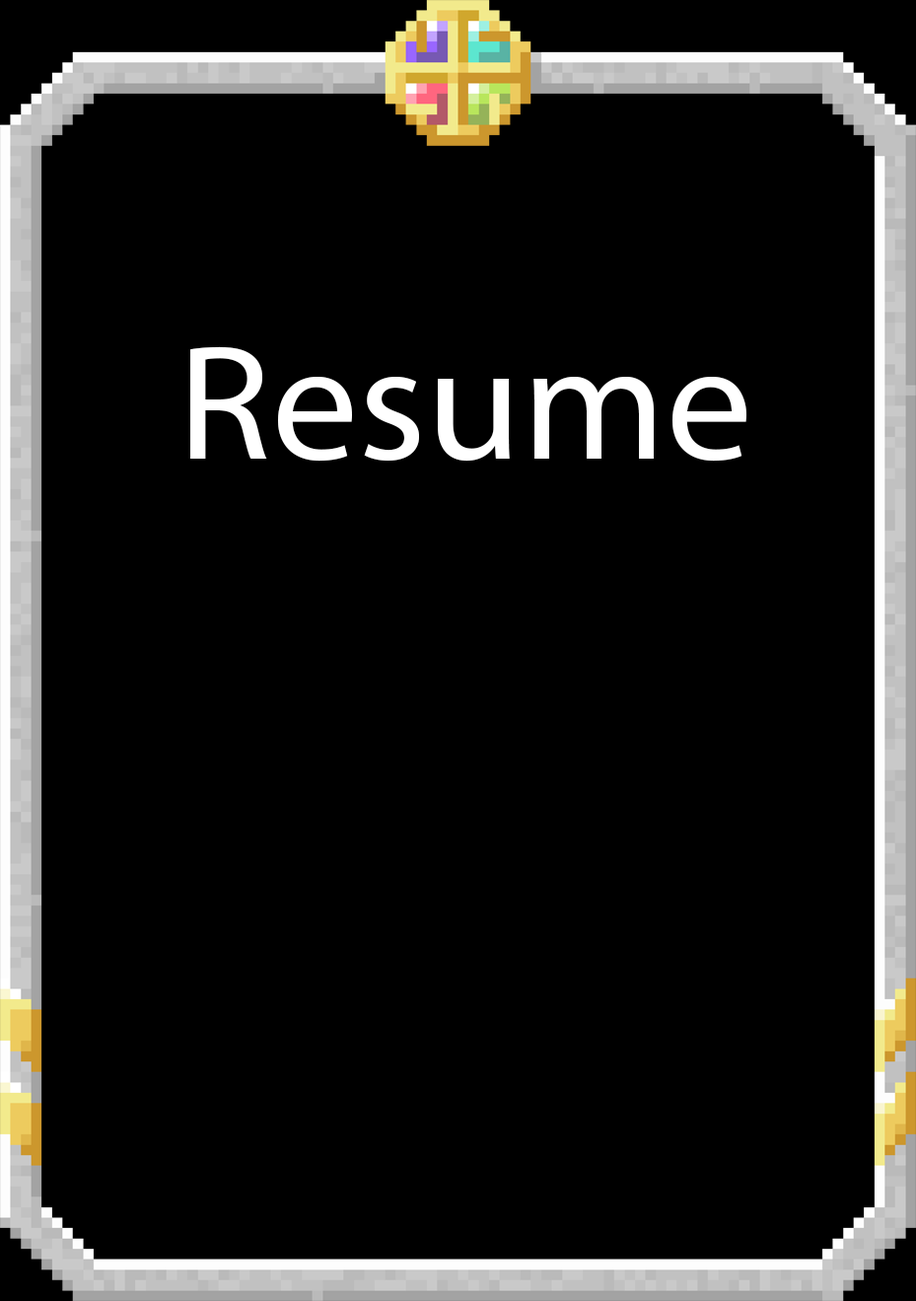
<style>
.page{position:relative;width:916px;height:1301px;background:#000000}
.page>*{position:absolute;margin:0}
.t1{font:164.2px "MyriadPro-Regular";color:#ffffff;scale:1.05 1}
</style>
<div class="page">
<p class="t1" style="left:190px;top:346px;width:557px;height:116px">Resume</p>
</div>
